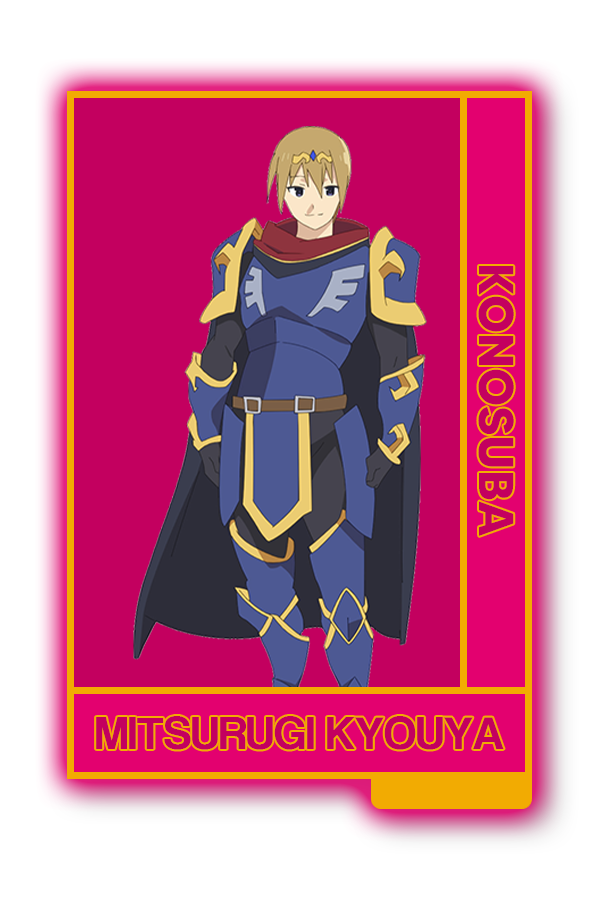
<style>
.page{position:relative;width:600px;height:900px;background:#c3005f}
.page>*{position:absolute;margin:0}
.t1{font:48.8px "MADETOMMY-Bold";color:#c3005f}
.t2{font:47.9px "CoolveticaRg-Regular";color:#c3005f}
</style>
<div class="page">
<p class="t1" style="left:478px;top:266px;width:36px;height:270px;rotate:90deg">KONOSUBA</p>
<p class="t2" style="left:96px;top:716px;width:408px;height:34px">MITSURUGI KYOUYA</p>
</div>
